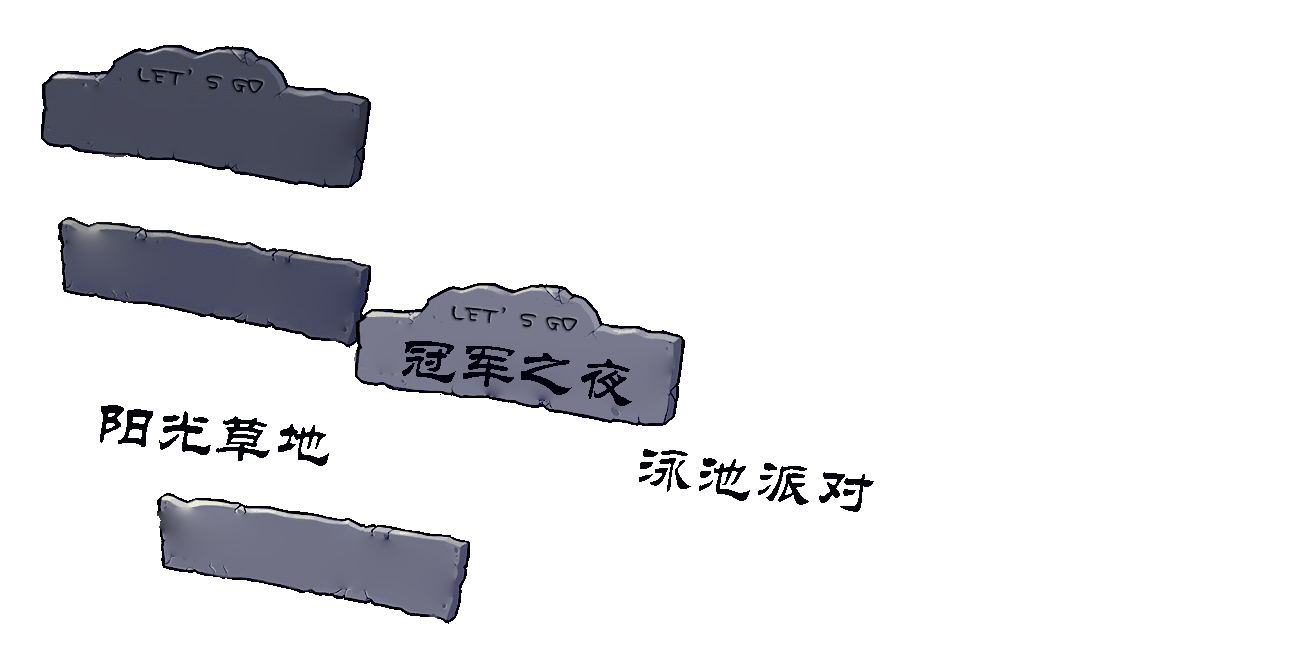
<style>
.page{position:relative;width:1294px;height:656px;background:#ffffff}
.page>*{position:absolute;margin:0}
.t1{font:60px "STLiti";color:#00000c}
.t2{font:60px "STLiti";color:#04060b}
</style>
<div class="page">
<p class="t1" style="left:402px;top:341px;width:230px;height:65px;rotate:6deg">冠军之夜</p>
<p class="t2" style="left:100px;top:405px;width:229px;height:61px;rotate:6deg">阳光草地</p>
<p class="t2" style="left:639px;top:449px;width:235px;height:63px;rotate:7deg">泳池派对</p>
</div>
